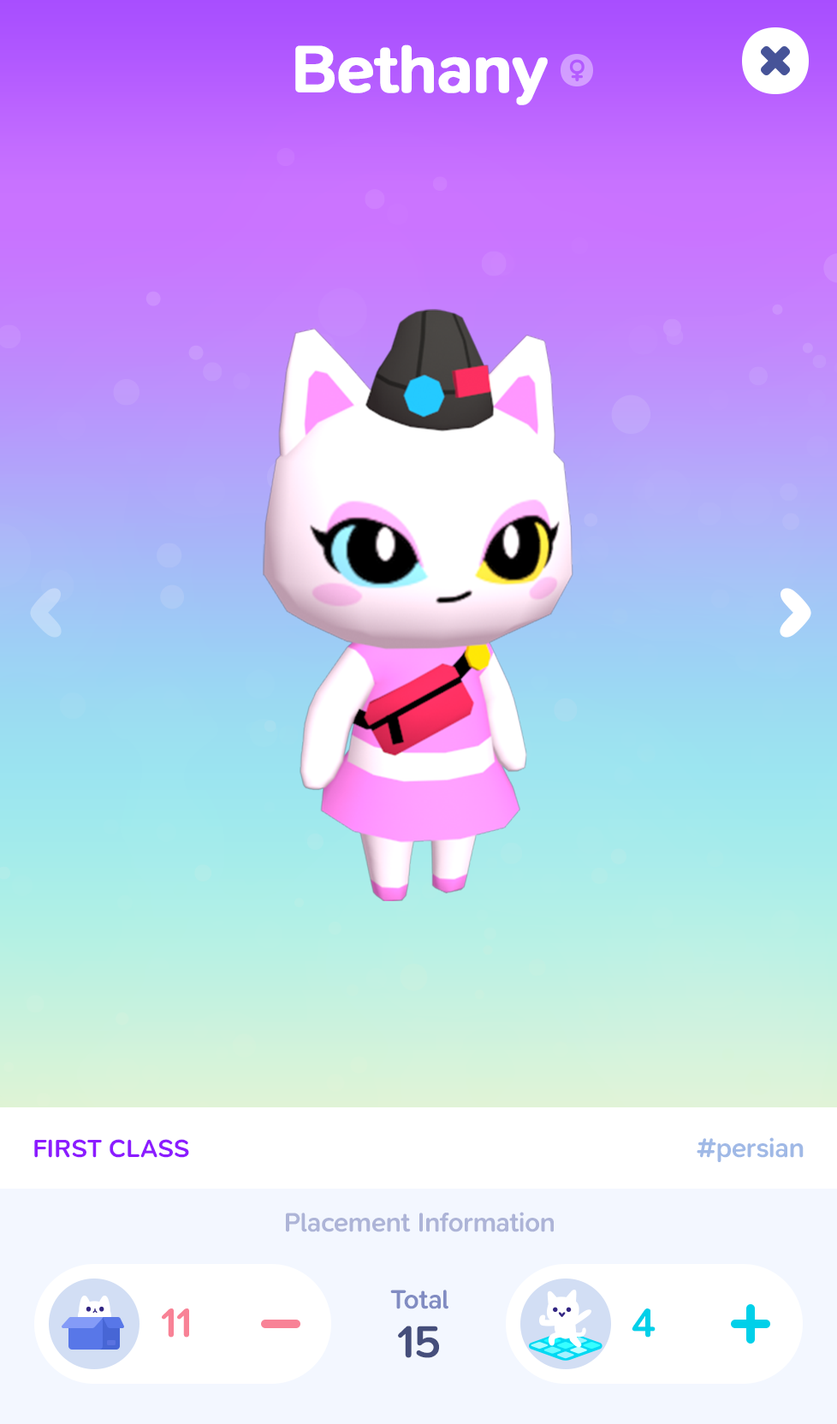
<style>
.page{position:relative;width:837px;height:1424px}
.page>*{position:absolute;margin:0}
.t1{font:68.5px "SNPro-SemiBold";letter-spacing:-0.01em;color:#ffffff;font-weight:bold}
.t2{font:25.7px "SNPro-SemiBold";letter-spacing:-0.01em;color:#8c1bff;text-transform:uppercase}
.t3{font:27.4px "SNPro-SemiBold";letter-spacing:-0.01em;color:#a0b9e6}
.t4{font:27.4px "SNPro-SemiBold";letter-spacing:-0.01em;color:#adb4d7}
.t5{font:27.4px "SNPro-SemiBold";letter-spacing:-0.01em;color:#818cc2}
.t6{font:41.7px "SNPro-SemiBold";letter-spacing:-0.01em;color:#f88296}
.t7{font:41.7px "SNPro-SemiBold";letter-spacing:-0.01em;color:#00d0e9}
.t8{font:46.2px "SNPro-SemiBold";letter-spacing:-0.01em;color:#454e7b}
</style>
<div class="page">
<p class="t1" style="left:295px;top:45px;width:253px;height:60px">Bethany</p>
<p class="t2" style="left:34px;top:1139px;width:155px;height:19px">First Class</p>
<p class="t3" style="left:697px;top:1138px;width:107px;height:24px">#persian</p>
<p class="t4" style="left:286px;top:1212px;width:268px;height:21px">Placement Information</p>
<p class="t5" style="left:390px;top:1290px;width:59px;height:20px">Total</p>
<p class="t6" style="left:162px;top:1309px;width:27px;height:29px">11</p>
<p class="t7" style="left:632px;top:1309px;width:24px;height:29px">4</p>
<p class="t8" style="left:398px;top:1326px;width:41px;height:32px">15</p>
</div>
